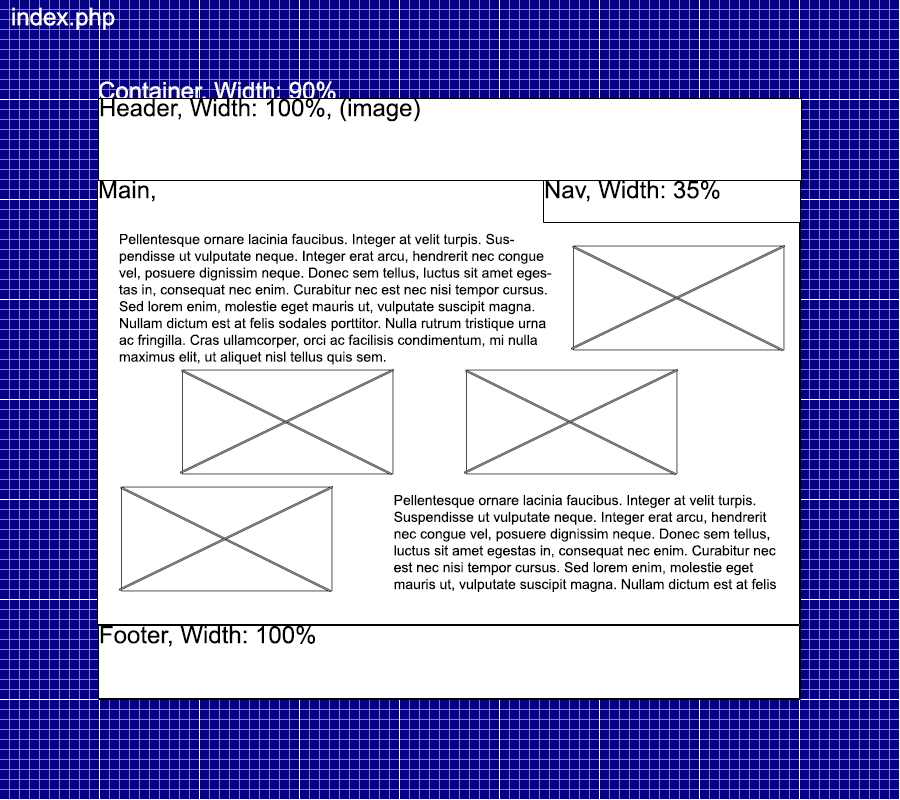
<style>
.page{position:relative;width:900px;height:800px;background:#ffffff}
.page>*{position:absolute;margin:0}
.t1{font:24px "ArialMT";color:#ffffff}
.t2{font:24px "ArialMT";color:#000000}
.t3{font:14px "ArialMT";color:#000000}
</style>
<div class="page">
<p class="t1" style="left:12px;top:7px;width:103px;height:23px">index.php</p>
<p class="t1" style="left:99px;top:81px;width:237px;height:22px">Container, Width: 90%</p>
<p class="t2" style="left:100px;top:98px;width:320px;height:24px">Header, Width: 100%, (image)</p>
<p class="t2" style="left:99px;top:181px;width:56px;height:21px">Main,</p>
<p class="t2" style="left:545px;top:180px;width:175px;height:22px">Nav, Width: 35%</p>
<p class="t3" style="left:119px;top:233px;width:433px;height:132px">Pellentesque ornare lacinia faucibus. Integer at velit turpis. Suspendisse ut vulputate neque. Integer erat arcu, hendrerit nec congue vel, posuere dignissim neque. Donec sem tellus, luctus sit amet egestas in, consequat nec enim. Curabitur nec est nec nisi tempor cursus. Sed lorem enim, molestie eget mauris ut, vulputate suscipit magna. Nullam dictum est at felis sodales porttitor. Nulla rutrum tristique urna ac fringilla. Cras ullamcorper, orci ac facilisis condimentum, mi nulla maximus elit, ut aliquet nisl tellus quis sem.</p>
<p class="t3" style="left:394px;top:494px;width:382px;height:98px">Pellentesque ornare lacinia faucibus. Integer at velit turpis. Suspendisse ut vulputate neque. Integer erat arcu, hendrerit nec congue vel, posuere dignissim neque. Donec sem tellus, luctus sit amet egestas in, consequat nec enim. Curabitur nec est nec nisi tempor cursus. Sed lorem enim, molestie eget mauris ut, vulputate suscipit magna. Nullam dictum est at felis sodales porttitor. Nulla rutrum tristique urna ac fringilla. Cras ullamcorper, orci ac facilisis condimentum, mi nulla maximus elit, ut aliquet nisl tellus quis sem.</p>
<p class="t2" style="left:100px;top:625px;width:215px;height:22px">Footer, Width: 100%</p>
</div>
